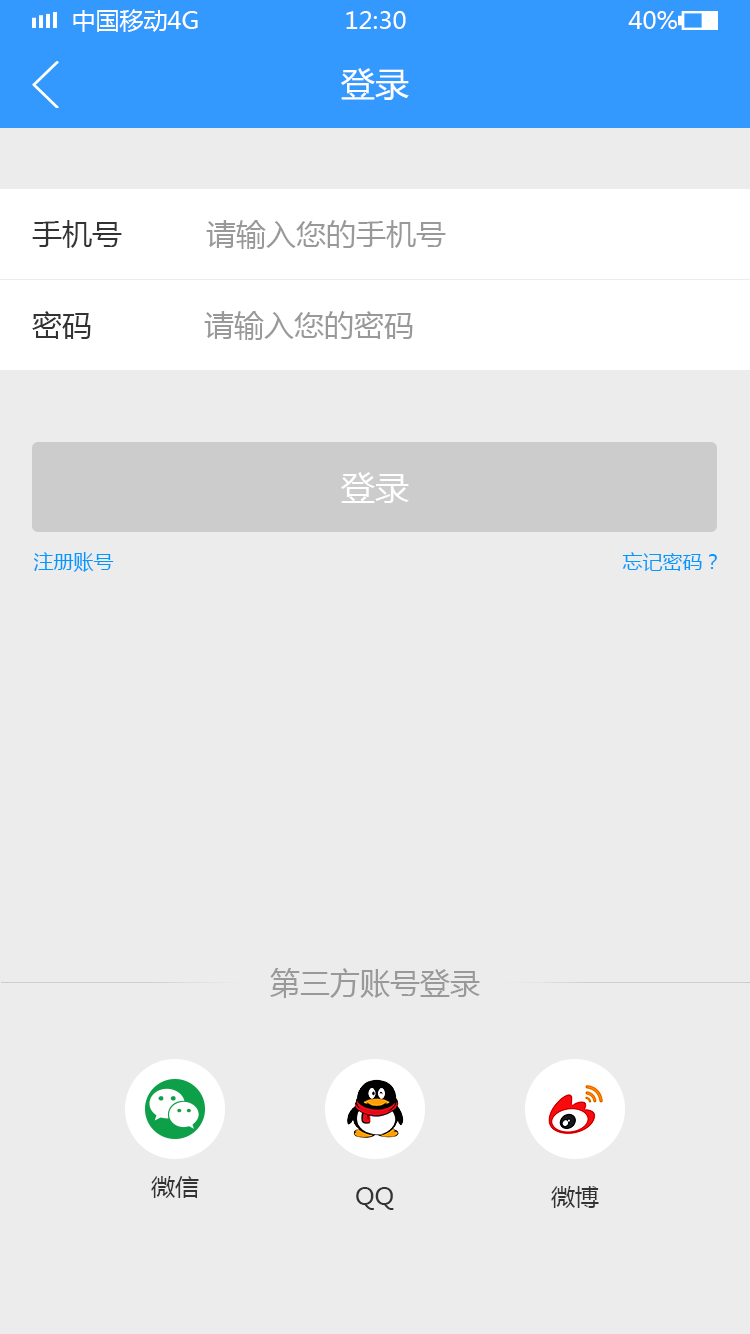
<style>
.page{position:relative;width:750px;height:1334px;background:#ececec}
.page>*{position:absolute;margin:0}
.t1{font:24px "MicrosoftYaHei";color:#ffffff;text-transform:uppercase}
.t2{font:34px "MicrosoftYaHei";color:#ffffff}
.t3{font:30px "MicrosoftYaHei";color:#333333}
.t4{font:30px "MicrosoftYaHei";color:#999999}
.t5{font:20px "MicrosoftYaHei";color:#0099ff}
.t6{font:24px "MicrosoftYaHei";color:#333333}
</style>
<div class="page">
<p class="t1" style="left:73px;top:9px;width:125px;height:23px">中国移动4G</p>
<p class="t1" style="left:346px;top:11px;width:60px;height:18px">12:30</p>
<p class="t1" style="left:628px;top:11px;width:49px;height:18px">40%</p>
<p class="t2" style="left:341px;top:68px;width:68px;height:32px">登录</p>
<p class="t3" style="left:32px;top:220px;width:90px;height:28px">手机号</p>
<p class="t4" style="left:206px;top:220px;width:240px;height:29px">请输入您的手机号</p>
<p class="t3" style="left:32px;top:311px;width:59px;height:28px">密码</p>
<p class="t4" style="left:204px;top:311px;width:209px;height:29px">请输入您的密码</p>
<p class="t2" style="left:341px;top:472px;width:68px;height:31px">登录</p>
<p class="t5" style="left:33px;top:552px;width:81px;height:20px">注册账号</p>
<p class="t5" style="left:622px;top:552px;width:95px;height:19px">忘记密码？</p>
<p class="t4" style="left:270px;top:968px;width:210px;height:30px">第三方账号登录</p>
<p class="t6" style="left:151px;top:1176px;width:48px;height:22px">微信</p>
<p class="t6" style="left:356px;top:1187px;width:38px;height:23px">QQ</p>
<p class="t6" style="left:551px;top:1186px;width:48px;height:22px">微博</p>
</div>
